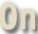
<style>
.page{position:relative;width:38px;height:34px;background:#e6dcc1}
.page>*{position:absolute;margin:0}
.t1{font:36px "Menlo-Bold";color:#e6dcc1;scale:0.9 1}
</style>
<div class="page">
<p class="t1" style="left:0px;top:2px;width:35px;height:28px">On</p>
</div>
